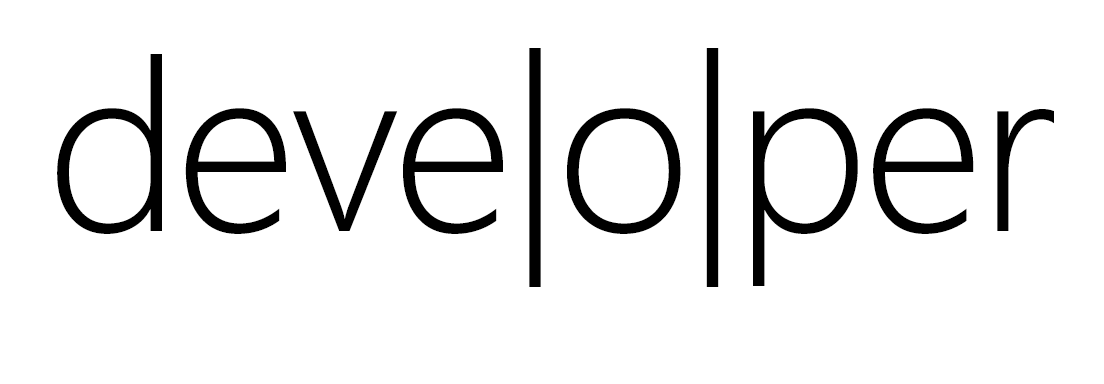
<style>
.page{position:relative;width:1104px;height:384px;background:#ffffff}
.page>*{position:absolute;margin:0}
.t1{font:221.3px "MicrosoftJhengHeiUILight";letter-spacing:-0.025em;color:#000000}
</style>
<div class="page">
<p class="t1" style="left:57px;top:48px;width:997px;height:239px">deve|o|per</p>
</div>
